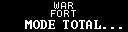
<style>
.page{position:relative;width:128px;height:32px;background:#000000}
.page>*{position:absolute;margin:0}
.t1{font:10px/8px "Terminal";letter-spacing:-0.05em;color:#ffffff}
.t2{font:12px "Terminal";letter-spacing:0.025em;color:#ffffff}
</style>
<div class="page">
<p class="t1" style="left:51px;top:2px;width:25px;height:15px;text-align:center">WAR<br>FORT</p>
<p class="t2" style="left:25px;top:20px;width:97px;height:9px">MODE TOTAL...</p>
</div>
